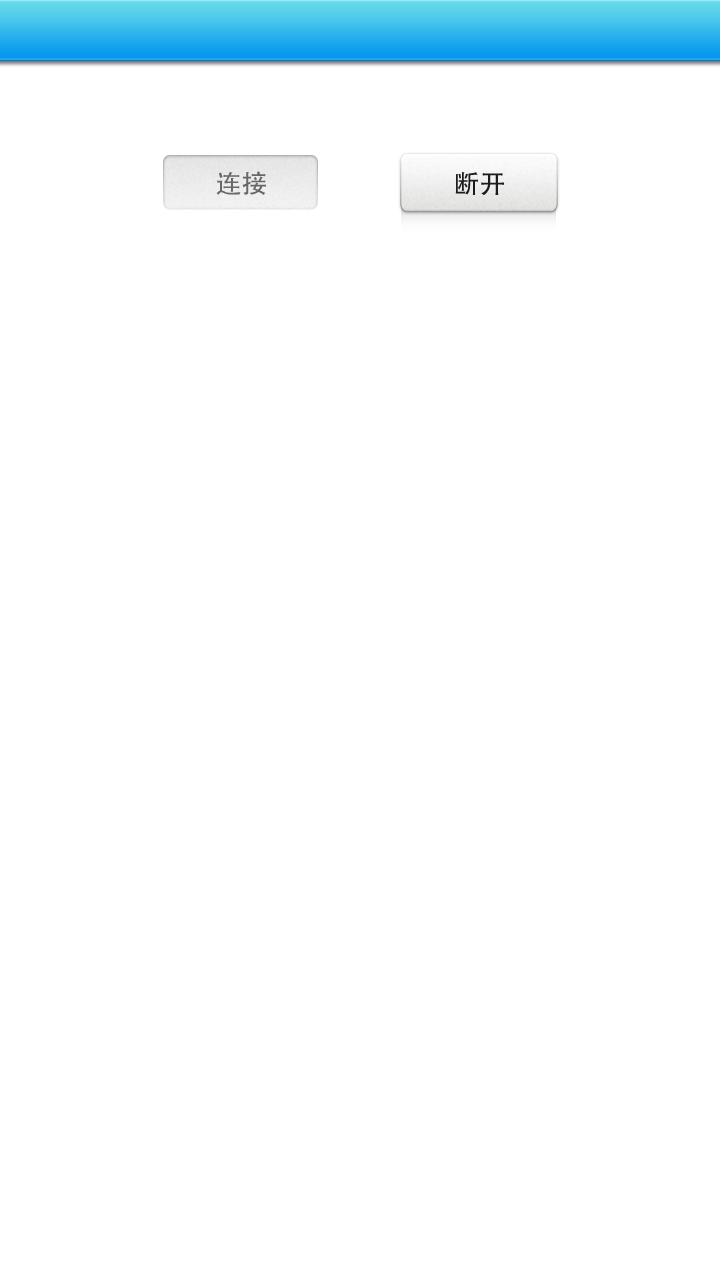
<style>
.page{position:relative;width:720px;height:1280px;background:#ffffff}
.page>*{position:absolute;margin:0}
.t1{font:25.8px "AdobeHeitiStd-Regular";color:#696666}
.t2{font:25.8px "AdobeHeitiStd-Regular";color:#1e1b1b}
</style>
<div class="page">
<p class="t1" style="left:216px;top:171px;width:50px;height:24px">连接</p>
<p class="t2" style="left:455px;top:172px;width:49px;height:24px">断开</p>
</div>
